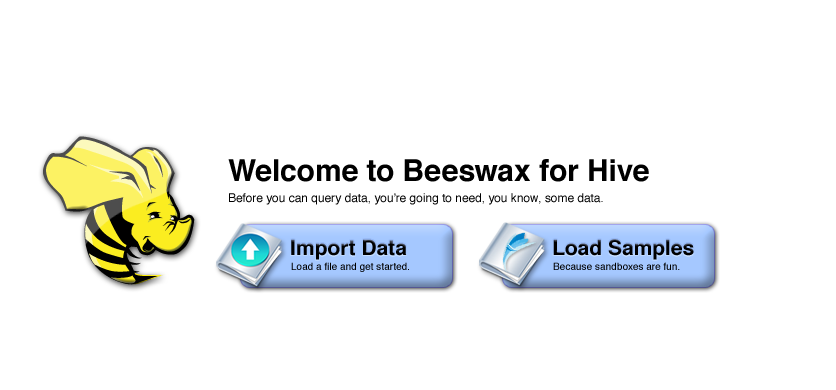
<style>
.page{position:relative;width:836px;height:390px;background:#ffffff}
.page>*{position:absolute;margin:0}
.t1{font:12px/21px "Helvetica";color:#000000}
.t2{font:30px "Helvetica-Bold";color:#000000}
.t3{font:21px "Helvetica-Bold";color:#000000}
.t4{font:10px "Helvetica";color:#000000}
</style>
<div class="page">
<p class="t1" style="left:228px;top:159px;width:421px;height:46px"><span class="t2">Welcome to Beeswax for Hive<br></span>Before you can query data, you’re going to need, you know, some data.</p>
<p class="t3" style="left:291px;top:239px;width:116px;height:21px">Import Data</p>
<p class="t3" style="left:553px;top:239px;width:141px;height:21px">Load Samples</p>
<p class="t4" style="left:291px;top:262px;width:118px;height:10px">Load a file and get started.</p>
<p class="t4" style="left:553px;top:262px;width:127px;height:8px">Because sandboxes are fun.</p>
</div>
